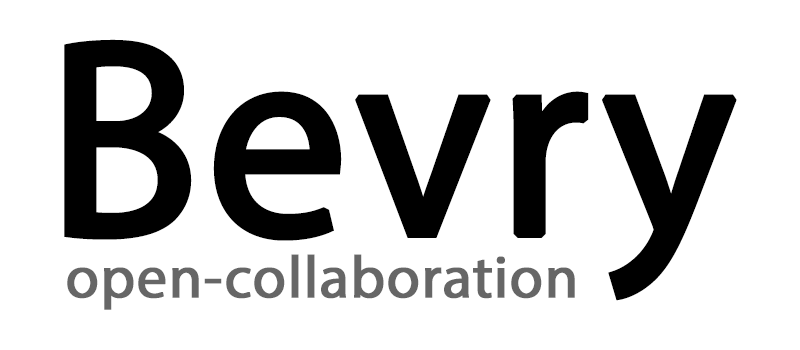
<style>
.page{position:relative;width:800px;height:350px;background:#ffffff}
.page>*{position:absolute;margin:0}
.t1{font:280px "MyriadPro-Regular";color:#000000;font-weight:bold}
.t2{font:60px "MyriadPro-Regular";color:#666666;font-weight:bold}
</style>
<div class="page">
<p class="t1" style="left:64px;top:39px;width:673px;height:262px">Bevry</p>
<p class="t2" style="left:67px;top:254px;width:508px;height:56px">open-collaboration</p>
</div>
